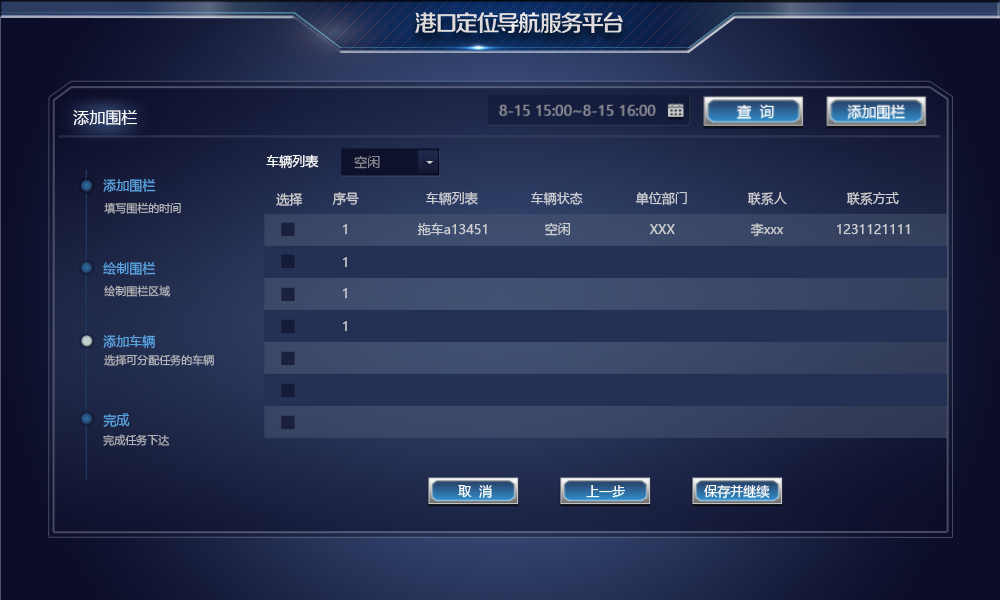
<style>
.page{position:relative;width:1000px;height:600px}
.page>*{position:absolute;margin:0}
.t1{font:16px "MicrosoftYaHei";color:#fdfdfd}
.t2{font:13px "MicrosoftYaHei";color:#ffffff}
.t3{font:13px "MicrosoftYaHei";color:#86868c}
.t4{font:13px "MicrosoftYaHei";color:#59a4e0}
.t5{font:13px "MicrosoftYaHei";color:#cccccc}
.t6{font:11px "MicrosoftYaHei";color:#b2b3b6}
.t7{font:11px "MicrosoftYaHei";color:#b3b4b7}
.t8{font:11px "MicrosoftYaHei";color:#b3b4b8}
</style>
<div class="page">
<p class="t1" style="left:73px;top:110px;width:64px;height:16px">添加围栏</p>
<p class="t2" style="left:266px;top:154px;width:53px;height:15px">车辆列表</p>
<p class="t3" style="left:354px;top:156px;width:26px;height:13px">空闲</p>
<p class="t4" style="left:103px;top:178px;width:53px;height:14px">添加围栏</p>
<p class="t5" style="left:276px;top:193px;width:27px;height:13px">选择</p>
<p class="t5" style="left:332px;top:192px;width:27px;height:13px">序号</p>
<p class="t5" style="left:426px;top:191px;width:52px;height:15px">车辆列表</p>
<p class="t5" style="left:531px;top:192px;width:52px;height:14px">车辆状态</p>
<p class="t5" style="left:635px;top:192px;width:52px;height:13px">单位部门</p>
<p class="t5" style="left:748px;top:192px;width:39px;height:13px">联系人</p>
<p class="t5" style="left:847px;top:192px;width:52px;height:13px">联系方式</p>
<p class="t6" style="left:104px;top:202px;width:77px;height:12px">填写围栏的时间</p>
<p class="t5" style="left:343px;top:224px;width:4px;height:10px">1</p>
<p class="t5" style="left:417px;top:223px;width:70px;height:12px">拖车a13451</p>
<p class="t5" style="left:545px;top:223px;width:25px;height:13px">空闲</p>
<p class="t5" style="left:649px;top:224px;width:26px;height:10px">XXX</p>
<p class="t5" style="left:750px;top:223px;width:34px;height:13px">李xxx</p>
<p class="t5" style="left:837px;top:224px;width:73px;height:10px">1231121111</p>
<p class="t5" style="left:343px;top:257px;width:4px;height:10px">1</p>
<p class="t4" style="left:103px;top:261px;width:53px;height:14px">绘制围栏</p>
<p class="t7" style="left:104px;top:285px;width:67px;height:12px">绘制围栏区域</p>
<p class="t5" style="left:343px;top:288px;width:4px;height:10px">1</p>
<p class="t5" style="left:343px;top:321px;width:4px;height:10px">1</p>
<p class="t4" style="left:103px;top:335px;width:52px;height:14px">添加车辆</p>
<p class="t8" style="left:104px;top:354px;width:111px;height:12px">选择可分配任务的车辆</p>
<p class="t4" style="left:103px;top:413px;width:27px;height:14px">完成</p>
<p class="t6" style="left:103px;top:434px;width:67px;height:12px">完成任务下达</p>
<p class="t2" style="left:458px;top:484px;width:34px;height:14px">取  消</p>
<p class="t2" style="left:586px;top:485px;width:39px;height:12px">上一步</p>
<p class="t2" style="left:704px;top:485px;width:66px;height:13px">保存并继续</p>
</div>
